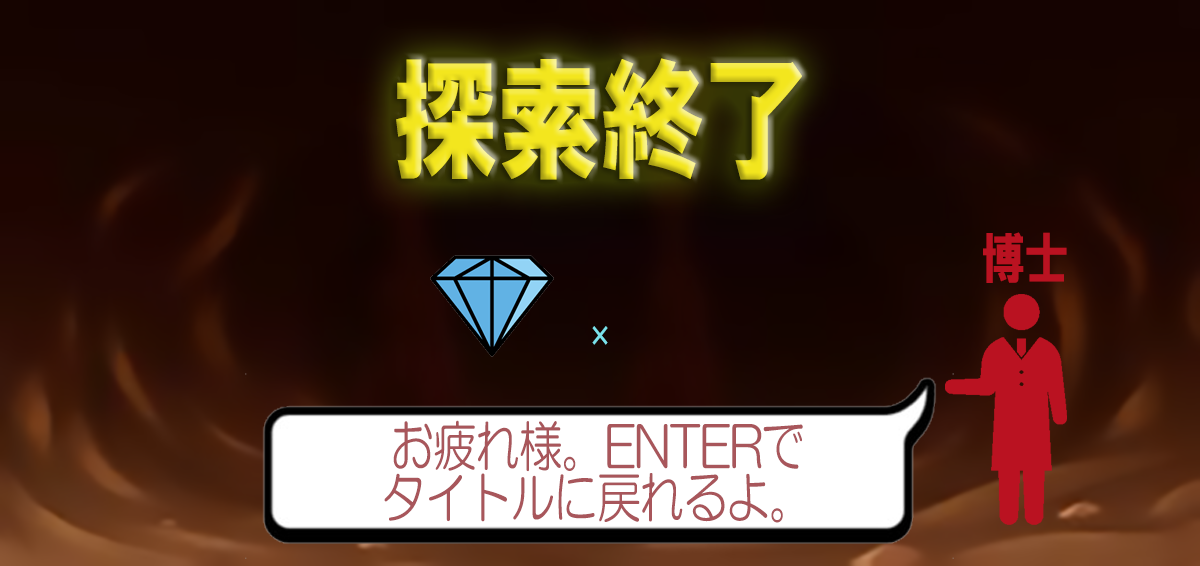
<style>
.page{position:relative;width:1200px;height:566px}
.page>*{position:absolute;margin:0}
.t1{font:132.3px "HGSoeiKakugothicUB";letter-spacing:-0.025em;font-variant:small-caps;scale:0.8 1}
.t2{font:55.1px "HGSoeiKakugothicUB";letter-spacing:-0.025em;color:#ba1221;font-variant:small-caps;scale:0.8 1}
.t3{font:27px "HGPSoeiKakugothicUB";letter-spacing:-0.025em;color:#7be2eb;font-variant:small-caps;scale:0.8 1}
.t4{font:55.1px/51.5px "HGMaruGothicMPRO";letter-spacing:-0.025em;color:#a8565b;font-variant:small-caps;scale:0.8 1}
</style>
<div class="page">
<p class="t1" style="left:396px;top:58px;width:406px;height:122px">探索終了</p>
<p class="t2" style="left:983px;top:232px;width:84px;height:51px">博士</p>
<p class="t3" style="left:592px;top:326px;width:16px;height:19px">×</p>
<p class="t4" style="left:384px;top:420px;width:419px;height:103px;text-align:center">お疲れ様。ENTERで<br>タイトルに戻れるよ。</p>
</div>
